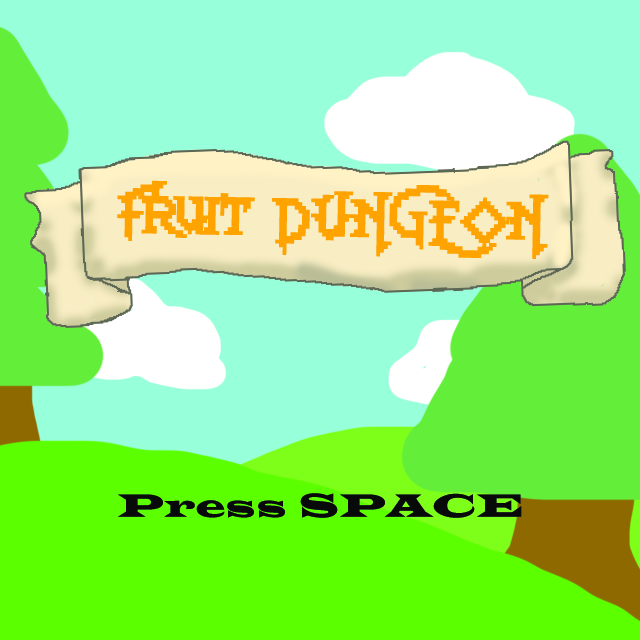
<style>
.page{position:relative;width:640px;height:640px;background:#97ffda}
.page>*{position:absolute;margin:0}
.t1{font:41.7px "Lady-Radical-2";letter-spacing:0.03em;color:#ffa300}
.t2{font:33.3px "LatinWide";letter-spacing:0.03em;color:#080a0a}
</style>
<div class="page">
<p class="t1" style="left:117px;top:180px;width:432px;height:79px;rotate:1deg">Fruit DUNGEON</p>
<p class="t2" style="left:118px;top:493px;width:404px;height:25px">Press SPACE</p>
</div>
